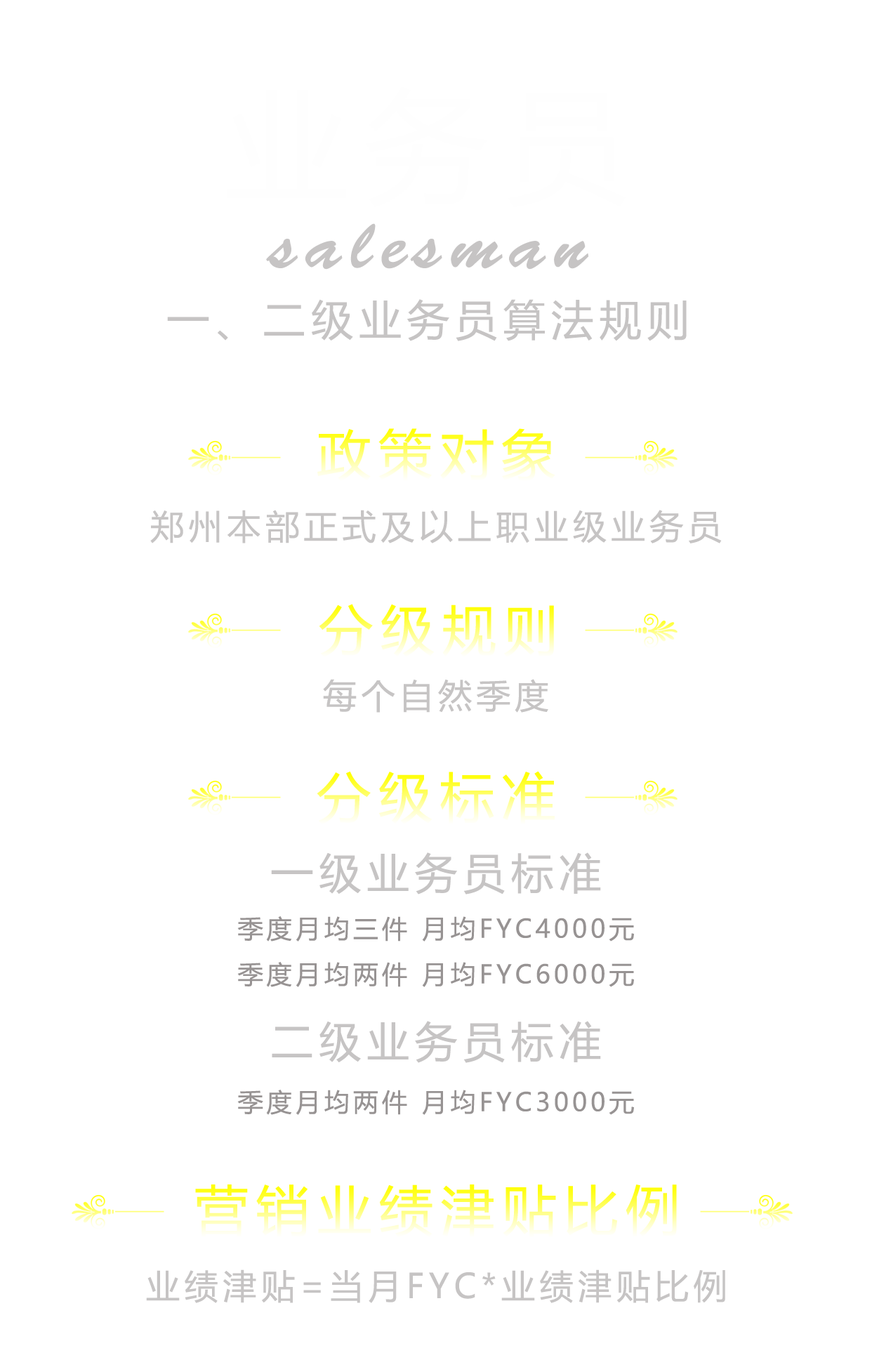
<style>
.page{position:relative;width:872px;height:1367px;background:#ffffff}
.page>*{position:absolute;margin:0}
.t1{font:69.9px "BrushScriptStd";letter-spacing:0.14em;color:#c6c4c4}
.t2{font:42.1px "MicrosoftYaHei";letter-spacing:0.14em;color:#c6c4c4}
.t3{font:54px "MicrosoftYaHei";letter-spacing:0.14em}
.t4{font:33.7px "MicrosoftYaHei";letter-spacing:0.14em;color:#c6c4c4}
.t5{font:25.3px "MicrosoftYaHei";letter-spacing:0.14em;color:#979393}
</style>
<div class="page">
<p class="t1" style="left:266px;top:223px;width:323px;height:47px">salesman</p>
<p class="t2" style="left:167px;top:299px;width:520px;height:42px">一、二级业务员算法规则</p>
<p class="t3" style="left:317px;top:428px;width:238px;height:54px">政策对象</p>
<p class="t4" style="left:150px;top:510px;width:572px;height:34px">郑州本部正式及以上职业级业务员</p>
<p class="t3" style="left:319px;top:604px;width:235px;height:53px">分级规则</p>
<p class="t4" style="left:323px;top:679px;width:225px;height:34px">每个自然季度</p>
<p class="t3" style="left:317px;top:771px;width:238px;height:53px">分级标准</p>
<p class="t2" style="left:271px;top:852px;width:330px;height:43px">一级业务员标准</p>
<p class="t5" style="left:237px;top:916px;width:397px;height:26px">季度月均三件 月均FYC4000元</p>
<p class="t5" style="left:237px;top:962px;width:397px;height:25px">季度月均两件 月均FYC6000元</p>
<p class="t2" style="left:272px;top:1021px;width:329px;height:42px">二级业务员标准</p>
<p class="t5" style="left:237px;top:1090px;width:397px;height:25px">季度月均两件 月均FYC3000元</p>
<p class="t3" style="left:195px;top:1185px;width:482px;height:53px">营销业绩津贴比例</p>
<p class="t4" style="left:146px;top:1270px;width:579px;height:33px">业绩津贴=当月FYC*业绩津贴比例</p>
</div>
